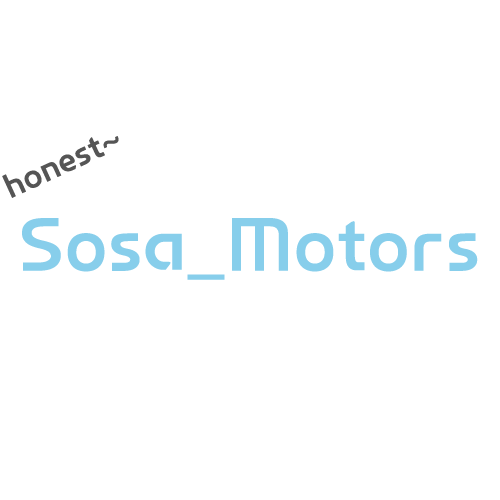
<style>
.page{position:relative;width:500px;height:500px;background:#ffffff}
.page>*{position:absolute;margin:0}
.t1{font:33.3px "InterGTB";color:#555555}
.t2{font:75px "InterGTB";color:#87ceeb}
</style>
<div class="page">
<p class="t1" style="left:2px;top:136px;width:117px;height:62px;rotate:-25deg">honest~</p>
<p class="t2" style="left:22px;top:218px;width:456px;height:62px">Sosa_Motors</p>
</div>
